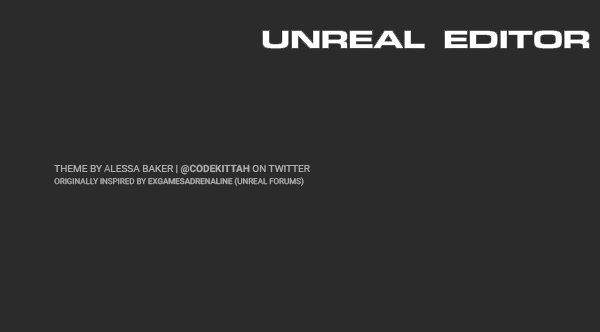
<style>
.page{position:relative;width:600px;height:332px;background:#2b2b2b}
.page>*{position:absolute;margin:0}
.t1{font:10px "Roboto-Regular";color:#adadad}
.t2{font:10px "Roboto-Thin";color:#adadad}
.t3{font:10px "Roboto-Bold";color:#adadad}
.t4{font:8px "Roboto-Regular";color:#adadad}
.t5{font:8px "Roboto-Medium";color:#adadad}
</style>
<div class="page">
<p class="t1" style="left:54px;top:164px;width:256px;height:11px">THEME BY <span class="t2">A</span>LESSA BAKER | <span class="t3">@CODEKITTAH </span>ON TWITTER</p>
<p class="t4" style="left:54px;top:177px;width:250px;height:9px">ORIGINALLY INSPIRED BY <span class="t5">EXGAMESADRENALINE </span>(UNREAL FORUMS)</p>
</div>
